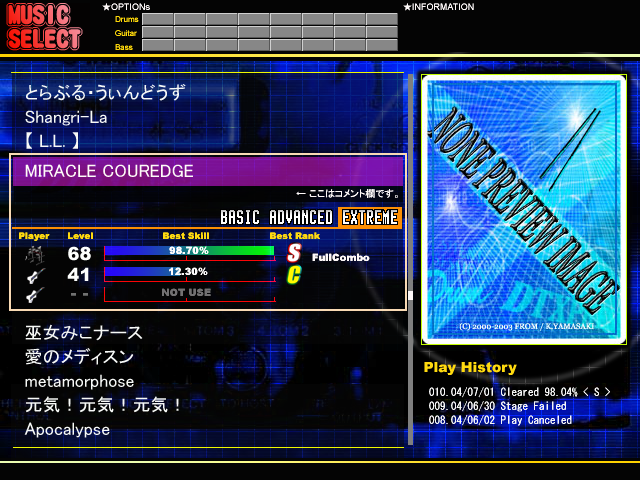
<style>
.page{position:relative;width:640px;height:480px}
.page>*{position:absolute;margin:0}
.t1{font:24px/12px "DFMaruGothic-SU-WIN-RKSJ-H"}
.t2{font:9px "ArialMT";color:#fdf8f8}
.t3{font:9px "MS-Gothic";color:#fdf8f8}
.t4{font:8px/14px "ArialMT";color:#fbd60a}
.t5{font:18px/24px "MS-PGothic";color:#f7f9f7}
.t6{font:18px "MS-PGothic";color:#fefbf8}
.t7{font:10px "MS-PGothic";color:#fdf8f8}
.t8{font:9px "Arial-Black";color:#ffda0f}
.t9{font:18px "Arial-Black";color:#fdfffd}
.t10{font:10px "Arial-Black";color:#fefcfc}
.t11{font:10px "Arial-Black";color:#fdf8f8}
.t12{font:18px "Arial-Black";color:#707170}
.t13{font:10px "Arial-Black";color:#727171}
.t14{font:11px/14px "MS-Gothic";color:#f6f6f6}
.t15{font:14px/24px "Arial-Black";color:#ffda0f}
.t16{font:11px/24px "MS-Gothic";color:#f6f6f6}
</style>
<div class="page">
<p class="t1" style="left:8px;top:5px;width:73px;height:44px">MUSIC<br><br>SELECT</p>
<p class="t2" style="left:102px;top:3px;width:48px;height:8px"><span class="t3">★</span>OPTIONs</p>
<p class="t2" style="left:403px;top:3px;width:71px;height:8px"><span class="t3">★</span>INFORMATION</p>
<p class="t4" style="left:115px;top:16px;width:24px;height:34px">Drums<br>Guitar<br>Bass</p>
<p class="t5" style="left:24px;top:84px;width:162px;height:354px">とらぶる・うぃんどうず<br>Shangri-La<br>【 L.L. 】<br><br><br><br><br><br><br><br>巫女みこナース<br>愛のメディスン<br>metamorphose<br>元気！元気！元気！<br>Apocalypse</p>
<p class="t6" style="left:25px;top:164px;width:168px;height:13px">MIRACLE COUREDGE</p>
<p class="t7" style="left:296px;top:189px;width:102px;height:9px">← ここはコメント欄です。</p>
<p class="t8" style="left:19px;top:232px;width:301px;height:9px">Player      Level                       Best Skill                    Best Rank</p>
<p class="t9" style="left:68px;top:246px;width:23px;height:15px">68</p>
<p class="t10" style="left:169px;top:246px;width:40px;height:8px">98.70%</p>
<p class="t11" style="left:312px;top:253px;width:58px;height:8px">FullCombo</p>
<p class="t9" style="left:67px;top:267px;width:22px;height:14px">41</p>
<p class="t10" style="left:169px;top:267px;width:39px;height:8px">12.30%</p>
<p class="t12" style="left:71px;top:293px;width:17px;height:3px">- -</p>
<p class="t13" style="left:162px;top:288px;width:49px;height:8px">NOT USE</p>
<p class="t14" style="left:424px;top:362px;width:186px;height:64px"><span class="t15">Play History<br>  </span><span class="t16">010.</span>04/07/01 Cleared 98.04% &lt; S &gt;<br> 009.04/06/30 Stage Failed<br> 008.04/06/02 Play Canceled</p>
</div>
